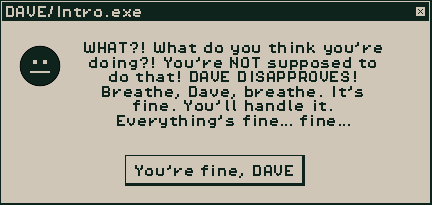
<style>
.page{position:relative;width:432px;height:205px;background:#cfc6b8}
.page>*{position:absolute;margin:0}
.t1{font:12.1px "PixelOperator8";color:#cfc6b8}
.t2{font:12.1px "PixelOperator8";color:#0e231c}
</style>
<div class="page">
<p class="t1" style="left:6px;top:6px;width:135px;height:11px">DAVE/Intro.exe</p>
<p class="t2" style="left:84px;top:42px;width:298px;height:86px;text-align:center">WHAT?! What do you think you’re doing?! You’re NOT supposed to do that! DAVE DISAPPROVES! Breathe, Dave, breathe. It’s fine. You’ll handle it. Everything’s fine… fine…</p>
<p class="t2" style="left:135px;top:165px;width:158px;height:13px">You’re fine, DAVE</p>
</div>
